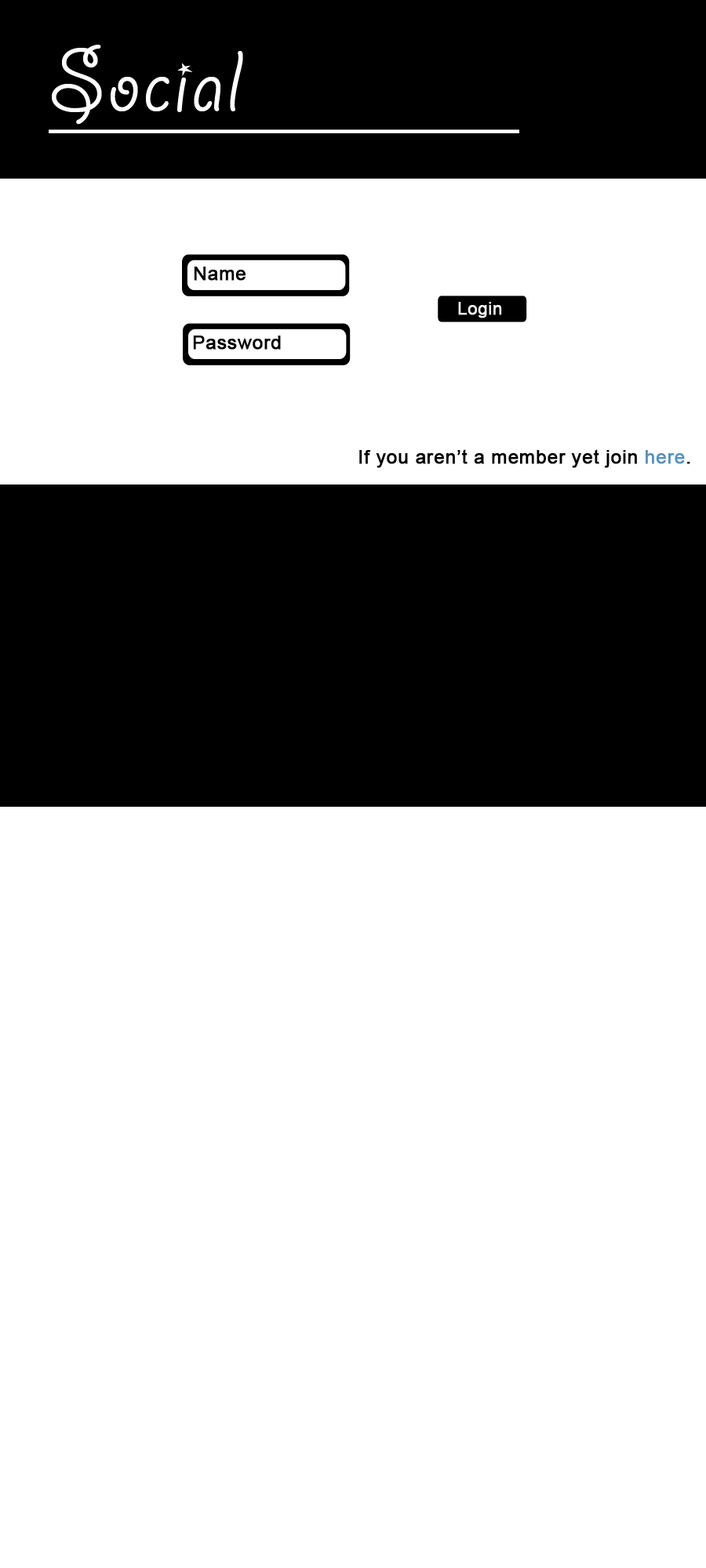
<style>
.page{position:relative;width:706px;height:1568px;background:#ffffff}
.page>*{position:absolute;margin:0}
.t1{font:97.2px "GiddyupStd";letter-spacing:0.02em;color:#ffffff}
.t2{font:18.8px "ArialMT";letter-spacing:0.02em;color:#000000;font-weight:bold}
.t3{font:16.9px "ArialMT";letter-spacing:0.02em;color:#f5f5f5;font-weight:bold}
.t4{font:18.8px "ArialMT";letter-spacing:0.02em;color:#5992be;font-weight:bold}
</style>
<div class="page">
<p class="t1" style="left:52px;top:45px;width:191px;height:80px">Social</p>
<p class="t2" style="left:194px;top:267px;width:51px;height:14px">Name</p>
<p class="t3" style="left:458px;top:302px;width:44px;height:16px">Login</p>
<p class="t2" style="left:193px;top:336px;width:88px;height:14px">Password</p>
<p class="t2" style="left:359px;top:449px;width:331px;height:19px">If you aren’t a member yet join <span class="t4">here</span>.</p>
</div>
